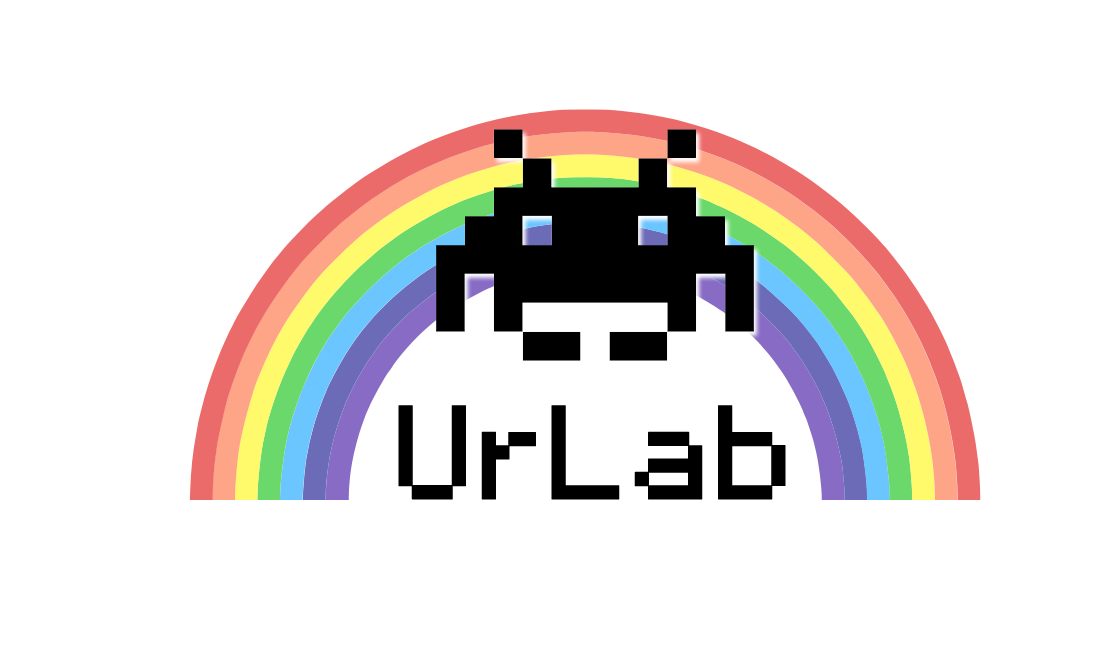
<style>
.page{position:relative;width:1114px;height:652px;background:#ffffff}
.page>*{position:absolute;margin:0}
.t1{font:120px "VolterGoldfish";color:#000000;font-weight:bold}
</style>
<div class="page">
<p class="t1" style="left:398px;top:405px;width:388px;height:95px">UrLab</p>
</div>
